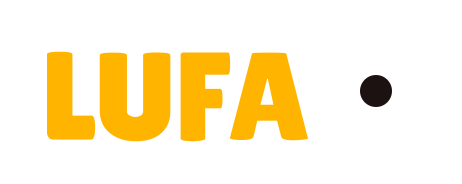
<style>
.page{position:relative;width:462px;height:184px;background:#ffffff}
.page>*{position:absolute;margin:0}
.t1{font:125px "LilitaOne";color:#ffb400}
</style>
<div class="page">
<p class="t1" style="left:47px;top:51px;width:261px;height:91px">LUFA</p>
</div>
